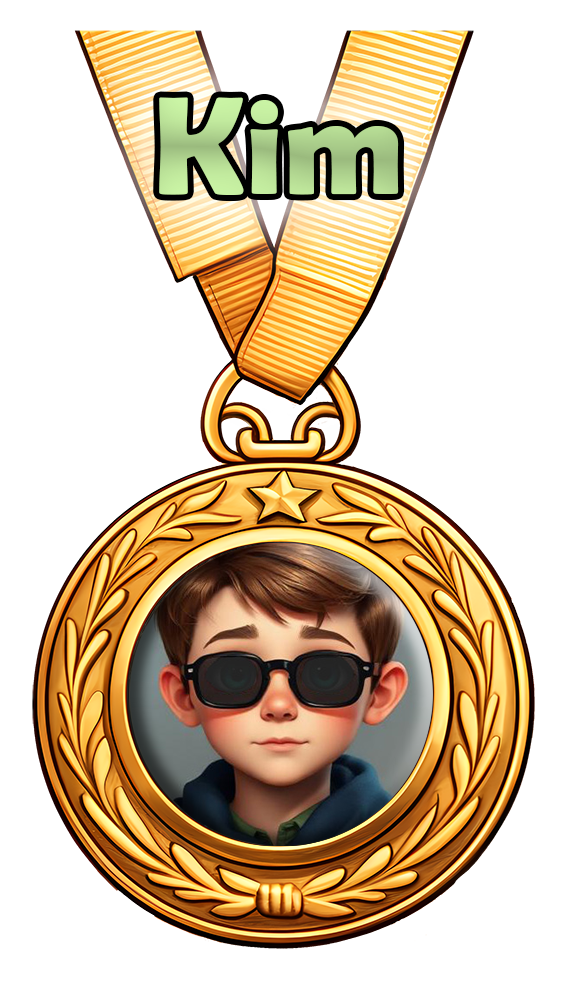
<style>
.page{position:relative;width:578px;height:1000px;background:#ffffff}
.page>*{position:absolute;margin:0}
.t1{font:140px "BerlinSansFBDemi-Bold"}
</style>
<div class="page">
<p class="t1" style="left:159px;top:97px;width:240px;height:98px">Kim</p>
</div>
